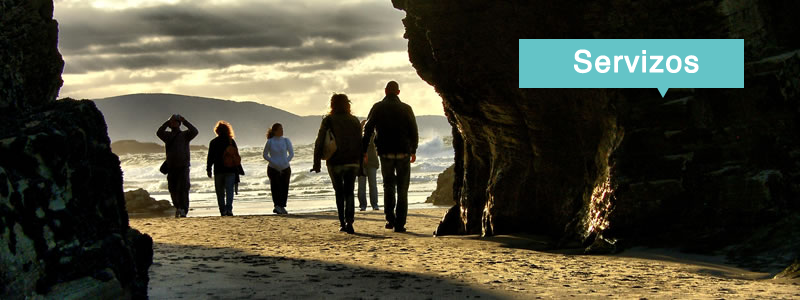
<style>
.page{position:relative;width:800px;height:300px}
.page>*{position:absolute;margin:0}
.t1{font:30px "Helvetica";letter-spacing:0.025em;color:#ffffff;font-weight:bold}
</style>
<div class="page">
<p class="t1" style="left:574px;top:49px;width:125px;height:25px">Servizos</p>
</div>
